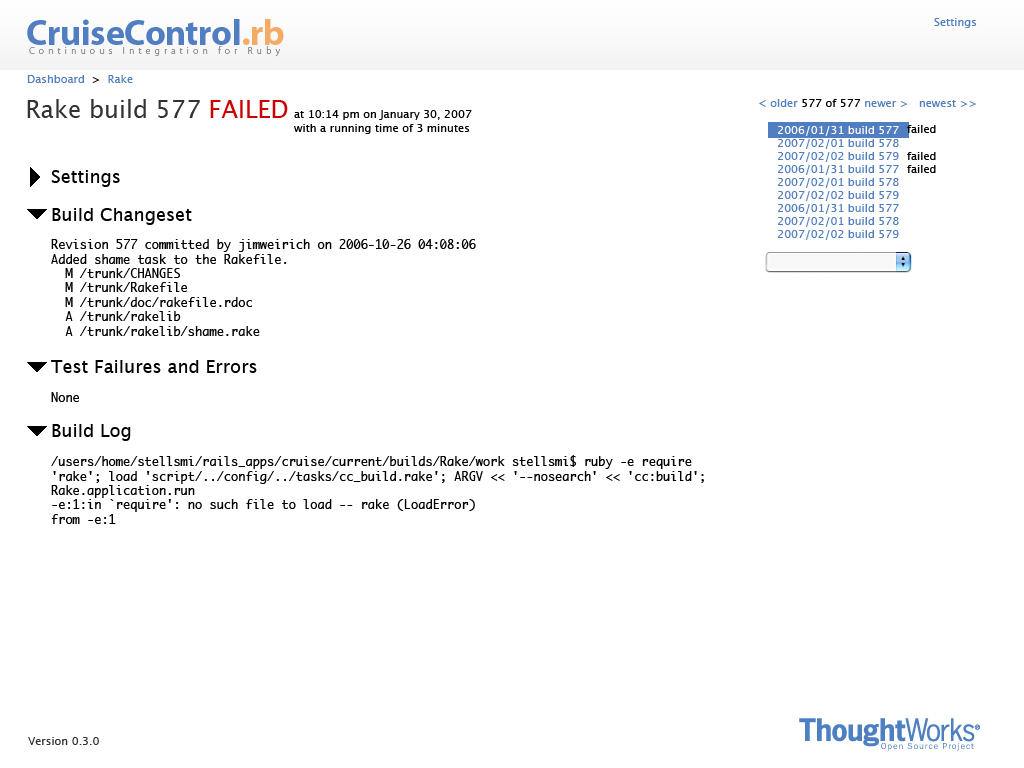
<style>
.page{position:relative;width:1024px;height:768px;background:#ffffff}
.page>*{position:absolute;margin:0}
.t1{font:36px "MyriadPro-Bold";letter-spacing:-0.01em;color:#507ec0}
.t2{font:36px "MyriadPro-Bold";letter-spacing:-0.01em;color:#f3ac66}
.t3{font:11px "LucidaGrande";color:#507ec0}
.t4{font:10px "MyriadPro-Light";letter-spacing:0.409em;color:#8a8a8a}
.t5{font:11px "LucidaGrande";color:#000000}
.t6{font:24px "LucidaGrande";color:#333333}
.t7{font:24px "LucidaGrande";color:#cc0000}
.t8{font:18px "LucidaGrande";color:#010101}
.t9{font:12px "Monaco";color:#010101}
.t10{font:11px "LucidaGrande";color:#333333}
</style>
<div class="page">
<p class="t1" style="left:27px;top:19px;width:257px;height:26px">CruiseControl<span class="t2">.rb</span></p>
<p class="t3" style="left:934px;top:18px;width:43px;height:10px">Settings</p>
<p class="t4" style="left:29px;top:46px;width:251px;height:11px">Continuous Integration for Ruby</p>
<p class="t3" style="left:27px;top:75px;width:106px;height:8px">Dashboard  <span class="t5">&gt;  </span>Rake</p>
<p class="t6" style="left:27px;top:99px;width:261px;height:19px">Rake build 577 <span class="t7">FAILED</span></p>
<p class="t3" style="left:759px;top:99px;width:217px;height:8px">&lt; older<span class="t5"> 577 of 577 </span>newer &gt;   newest &gt;&gt;</p>
<p class="t5" style="left:294px;top:110px;width:178px;height:24px">at 10:14 pm on January 30, 2007<br>with a running time of 3 minutes</p>
<p class="t5" style="left:907px;top:125px;width:29px;height:48px">failed<br><br>failed<br>failed</p>
<p class="t8" style="left:51px;top:170px;width:69px;height:17px">Settings</p>
<p class="t3" style="left:778px;top:165px;width:121px;height:36px">2006/01/31 build 577<br>2007/02/01 build 578<br>2007/02/02 build 579</p>
<p class="t8" style="left:52px;top:208px;width:140px;height:17px">Build Changeset</p>
<p class="t3" style="left:778px;top:204px;width:121px;height:36px">2006/01/31 build 577<br>2007/02/01 build 578<br>2007/02/02 build 579</p>
<p class="t9" style="left:51px;top:239px;width:425px;height:97px">Revision 577 committed by jimweirich on 2006-10-26 04:08:06<br>Added shame task to the Rakefile.<br>  M /trunk/CHANGES<br>  M /trunk/Rakefile<br>  M /trunk/doc/rakefile.rdoc<br>  A /trunk/rakelib<br>  A /trunk/rakelib/shame.rake</p>
<p class="t8" style="left:51px;top:360px;width:206px;height:13px">Test Failures and Errors</p>
<p class="t9" style="left:51px;top:392px;width:28px;height:10px">None</p>
<p class="t8" style="left:52px;top:424px;width:79px;height:17px">Build Log</p>
<p class="t9" style="left:51px;top:455px;width:653px;height:69px">/users/home/stellsmi/rails_apps/cruise/current/builds/Rake/work stellsmi$ ruby -e require 'rake'; load 'script/../config/../tasks/cc_build.rake'; ARGV &lt;&lt; '--nosearch' &lt;&lt; 'cc:build'; Rake.application.run<br>-e:1:in `require': no such file to load -- rake (LoadError)<br>from -e:1</p>
<p class="t10" style="left:28px;top:737px;width:71px;height:8px">Version 0.3.0</p>
</div>
